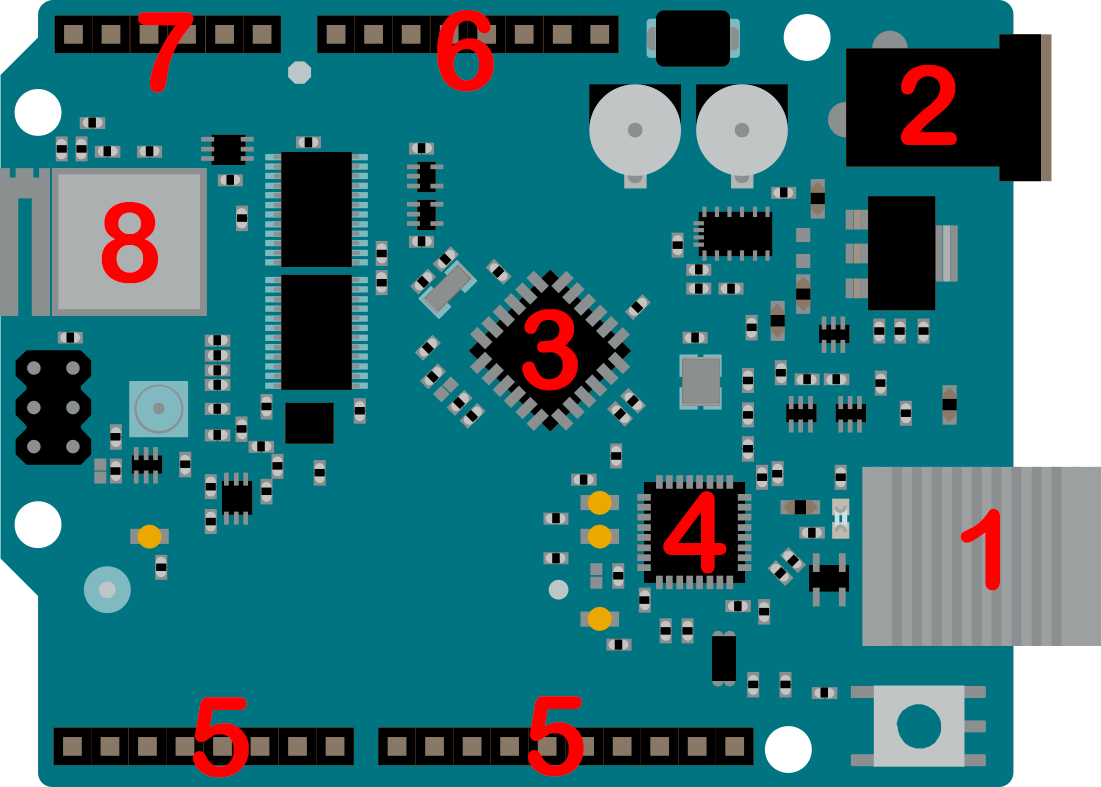
<style>
.page{position:relative;width:1101px;height:787px;background:#017481}
.page>*{position:absolute;margin:0}
.t1{font:111.1px "ArialRoundedMTBold";color:#ff0000}
</style>
<div class="page">
<p class="t1" style="left:138px;top:12px;width:56px;height:81px">7</p>
<p class="t1" style="left:437px;top:10px;width:57px;height:82px">6</p>
<p class="t1" style="left:901px;top:65px;width:56px;height:80px">2</p>
<p class="t1" style="left:101px;top:202px;width:57px;height:82px">8</p>
<p class="t1" style="left:522px;top:309px;width:56px;height:82px">3</p>
<p class="t1" style="left:663px;top:491px;width:64px;height:83px">4</p>
<p class="t1" style="left:960px;top:509px;width:41px;height:82px">1</p>
<p class="t1" style="left:193px;top:697px;width:56px;height:81px">5</p>
<p class="t1" style="left:528px;top:696px;width:56px;height:81px">5</p>
</div>
